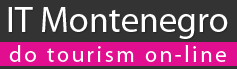
<style>
.page{position:relative;width:237px;height:69px;background:#333333}
.page>*{position:absolute;margin:0}
.t1{font:36px "MyriadPro-Regular";color:#ffffff}
.t2{font:23px "MyriadPro-Regular";letter-spacing:0.11em;color:#ffffff}
</style>
<div class="page">
<p class="t1" style="left:8px;top:7px;width:220px;height:32px">IT Montenegro</p>
<p class="t2" style="left:9px;top:45px;width:217px;height:17px">do tourism on-line</p>
</div>
